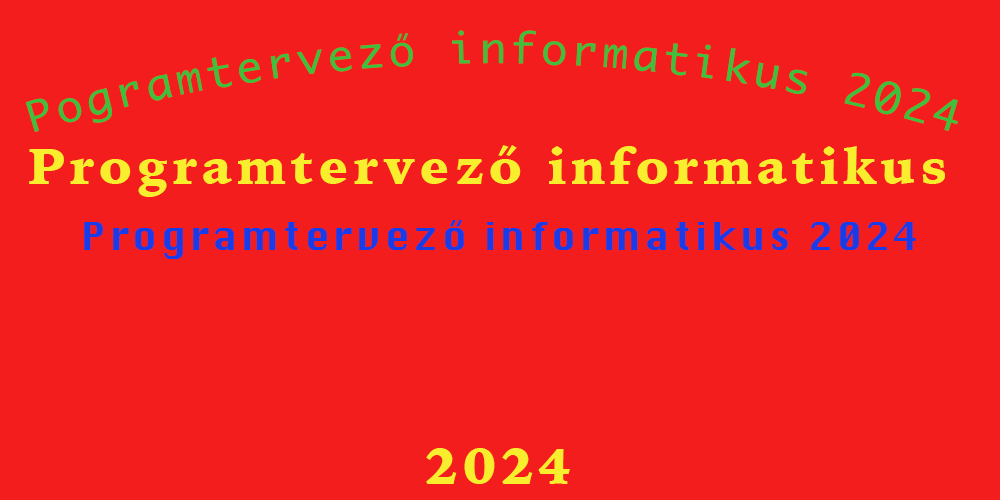
<style>
.page{position:relative;width:1000px;height:500px;background:#f31d1d}
.page>*{position:absolute;margin:0}
.t1{font:41.7px/300px "Ayuthaya";letter-spacing:0.1em;color:#3dc13d}
.t2{font:50px/300px "IowanOldStyle-Black";letter-spacing:0.1em;color:#f8ee2d}
.t3{font:37.5px "Silom";letter-spacing:0.1em;color:#1a3ce7}
</style>
<div class="page">
<p class="t1" style="left:25px;top:30px;width:933px;height:102px;text-align:center">Pogramtervező informatikus 2024</p>
<p class="t2" style="left:29px;top:145px;width:916px;height:339px;text-align:center">Programtervező informatikus <br>2024</p>
<p class="t3" style="left:84px;top:220px;width:832px;height:39px">Programtervező informatikus 2024</p>
</div>
